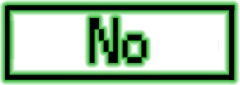
<style>
.page{position:relative;width:240px;height:85px;background:#ffffff}
.page>*{position:absolute;margin:0}
.t1{font:60px "Small Fonts";color:#000000}
</style>
<div class="page">
<p class="t1" style="left:89px;top:18px;width:58px;height:45px">No</p>
</div>
